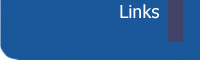
<style>
.page{position:relative;width:200px;height:61px;background:#19579a}
.page>*{position:absolute;margin:0}
.t1{font:18px "Tahoma";color:#ffffff}
</style>
<div class="page">
<p class="t1" style="left:120px;top:4px;width:39px;height:15px">Links</p>
</div>
